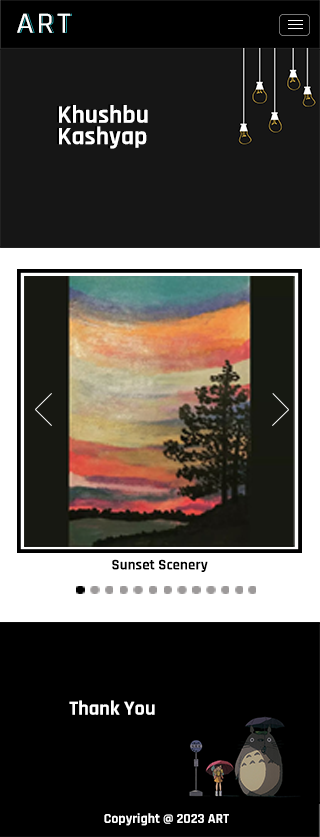
<style>
.page{position:relative;width:320px;height:837px;background:#000000}
.page>*{position:absolute;margin:0}
.t1{font:29.4px "Rajdhani-Medium";letter-spacing:0.1em;color:#ffffff;scale:1.08 1}
.t2{font:29.4px "Rajdhani-Medium";letter-spacing:0.1em;scale:1.08 1}
.t3{font:25.4px/21.5px "Rajdhani-Bold";color:#ffffff}
.t4{font:15.1px "Rajdhani-Bold";color:#000000}
.t5{font:20.4px "Rajdhani-Bold";color:#ffffff}
.t6{font:13.9px "Rajdhani-Bold";color:#ffffff}
</style>
<div class="page">
<p class="t1" style="left:17px;top:13px;width:54px;height:20px">ART</p>
<p class="t2" style="left:18px;top:13px;width:54px;height:20px">ART</p>
<p class="t2" style="left:18px;top:13px;width:54px;height:20px">ART</p>
<p class="t3" style="left:59px;top:105px;width:89px;height:44px">Khushbu<br>Kashyap</p>
<p class="t4" style="left:112px;top:559px;width:96px;height:13px">Sunset Scenery</p>
<p class="t5" style="left:69px;top:700px;width:86px;height:15px">Thank You</p>
<p class="t6" style="left:104px;top:813px;width:125px;height:13px">Copyright @ 2023 ART</p>
</div>
